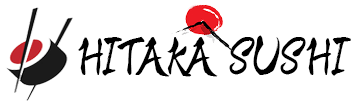
<style>
.page{position:relative;width:357px;height:104px;background:#ffffff}
.page>*{position:absolute;margin:0}
.t1{font:53.2px "JapanWave";color:#000000;scale:0.83 1}
</style>
<div class="page">
<p class="t1" style="left:78px;top:35px;width:273px;height:42px">HITAKA SUSHI</p>
</div>
